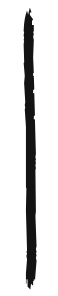
<style>
.page{position:relative;width:58px;height:296px;background:#ffffff}
.page>*{position:absolute;margin:0}
.t1{font:431.3px "Hosofuwafont";color:#131313;scale:0.39 1}
</style>
<div class="page">
<p class="t1" style="left:23px;top:7px;width:14px;height:283px">l</p>
</div>
